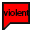
<style>
.page{position:relative;width:32px;height:32px;background:#ffffff}
.page>*{position:absolute;margin:0}
.t1{font:9px "MyriadPro-Regular";color:#050505}
</style>
<div class="page">
<p class="t1" style="left:3px;top:9px;width:27px;height:7px">violent</p>
</div>
